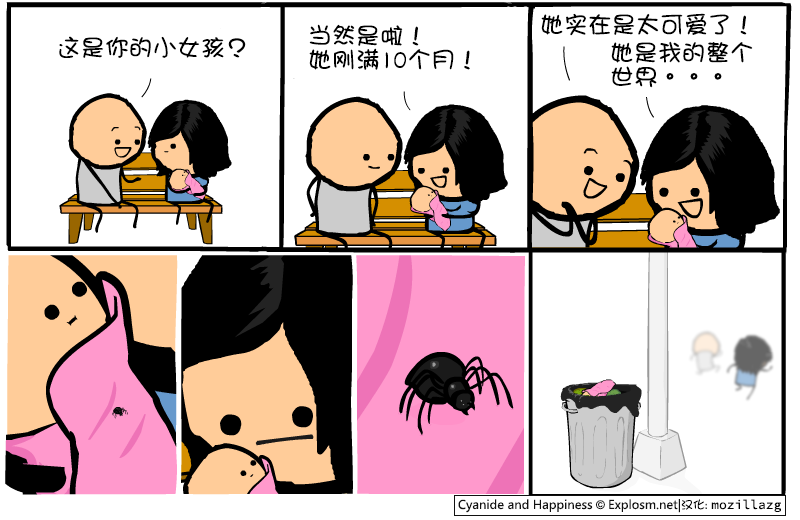
<style>
.page{position:relative;width:800px;height:520px;background:#ffffff}
.page>*{position:absolute;margin:0}
.t1{font:24px "DFGirl";color:#000000}
.t2{font:24px/24px "DFGirl";color:#000000}
</style>
<div class="page">
<p class="t1" style="left:541px;top:13px;width:206px;height:23px">她实在是太可爱了！</p>
<p class="t2" style="left:309px;top:24px;width:161px;height:46px">当然是啦！<br>她刚满10个月！</p>
<p class="t1" style="left:59px;top:36px;width:187px;height:22px">这是你的小女孩？</p>
<p class="t2" style="left:611px;top:41px;width:142px;height:47px">她是我的整个<br>世界。。。</p>
</div>
